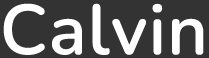
<style>
.page{position:relative;width:209px;height:58px;background:#333333}
.page>*{position:absolute;margin:0}
.t1{font:70px "Nunito-SemiBold";letter-spacing:-0.005em;color:#ffffff;font-weight:bold}
</style>
<div class="page">
<p class="t1" style="left:3px;top:3px;width:201px;height:52px">Calvin</p>
</div>
